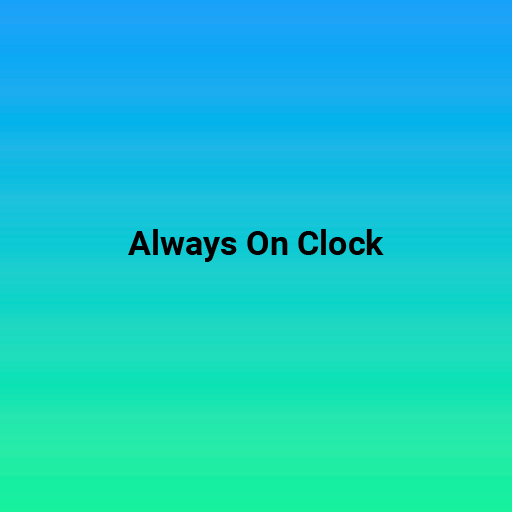
<style>
.page{position:relative;width:512px;height:512px}
.page>*{position:absolute;margin:0}
.t1{font:34.1px "Roboto-Bold";color:#000000}
</style>
<div class="page">
<p class="t1" style="left:128px;top:229px;width:256px;height:33px">Always On Clock</p>
</div>
